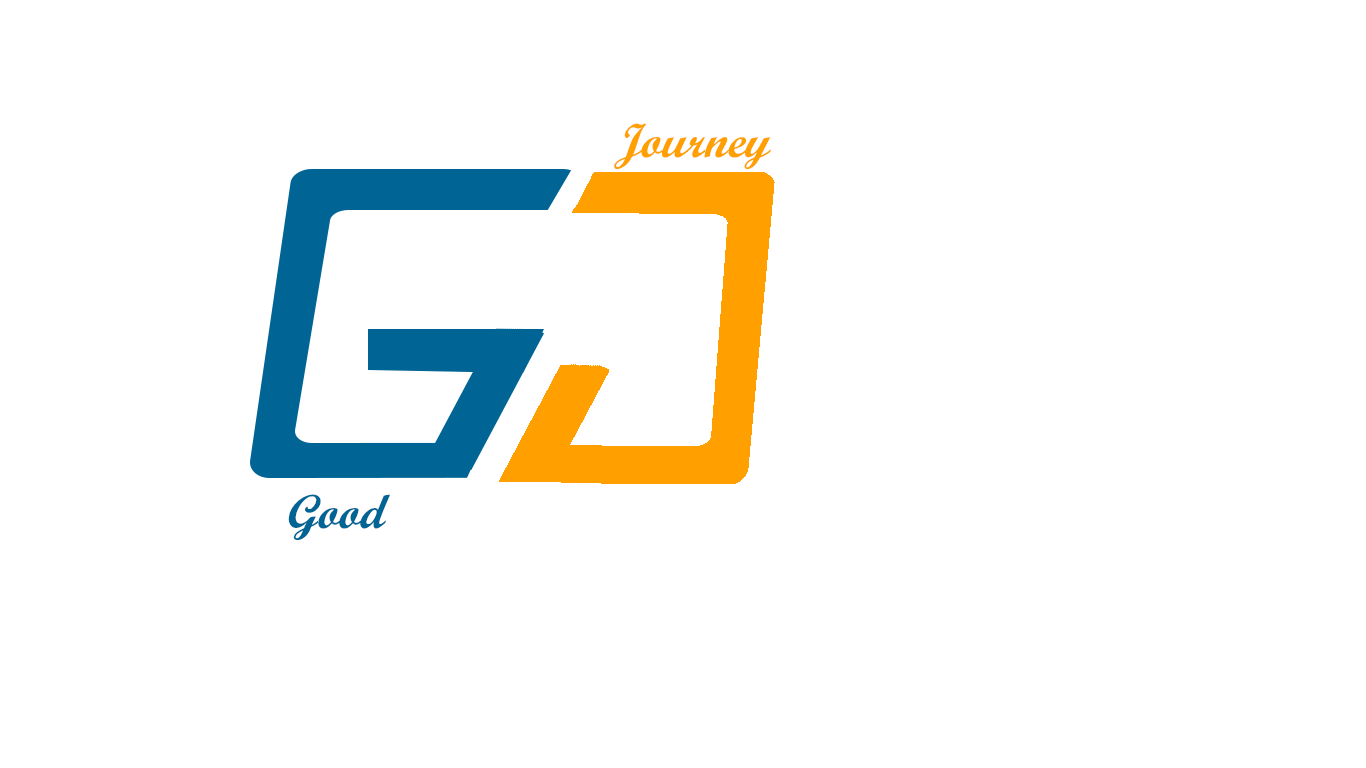
<style>
.page{position:relative;width:1366px;height:768px;background:#ffffff}
.page>*{position:absolute;margin:0}
.t1{font:48px "ScriptMTBold";color:#ff9f00;font-style:italic}
.t2{font:48px "ScriptMTBold";color:#006495;font-style:italic}
</style>
<div class="page">
<p class="t1" style="left:614px;top:123px;width:157px;height:46px">Journey</p>
<p class="t2" style="left:288px;top:494px;width:102px;height:46px">Good</p>
</div>
